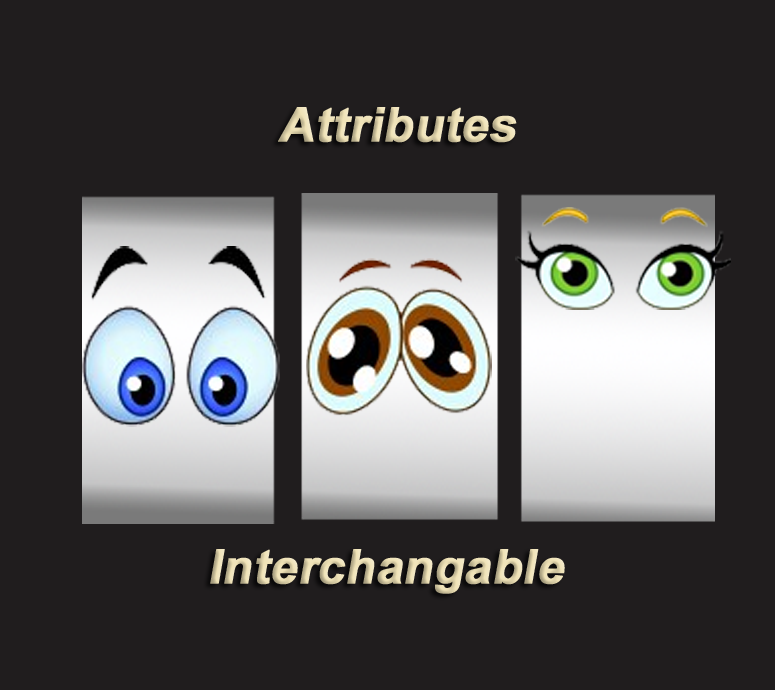
<style>
.page{position:relative;width:775px;height:690px;background:#201d1e}
.page>*{position:absolute;margin:0}
.t1{font:47.5px "Arial-BoldMT";color:#efe2b6;font-weight:bold;font-style:italic}
</style>
<div class="page">
<p class="t1" style="left:278px;top:107px;width:239px;height:36px">Attributes</p>
<p class="t1" style="left:210px;top:549px;width:355px;height:45px">Interchangable</p>
</div>
